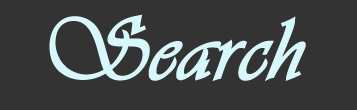
<style>
.page{position:relative;width:357px;height:110px;background:#333333}
.page>*{position:absolute;margin:0}
.t1{font:90px "Vivaldii";color:#daf9fc;font-weight:bold}
</style>
<div class="page">
<p class="t1" style="left:49px;top:14px;width:257px;height:67px">Search</p>
</div>
